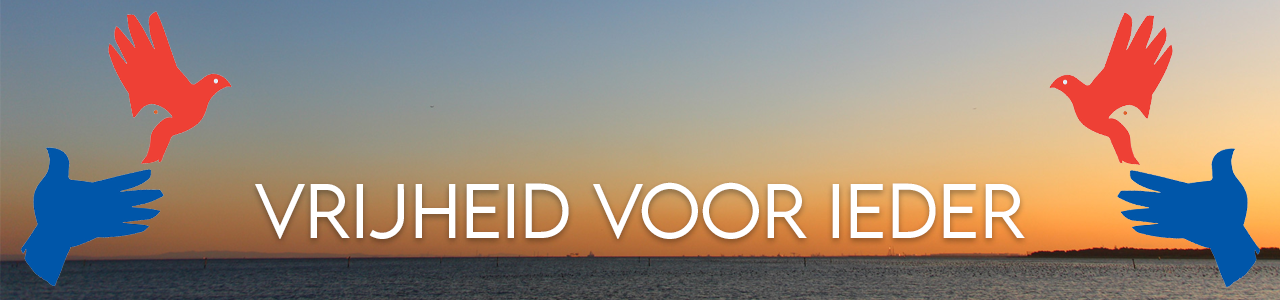
<style>
.page{position:relative;width:1280px;height:300px}
.page>*{position:absolute;margin:0}
.t1{font:69px "LEMONMILK-Light";color:#ffffff}
</style>
<div class="page">
<p class="t1" style="left:255px;top:182px;width:770px;height:57px">Vrijheid voor ieder</p>
</div>
